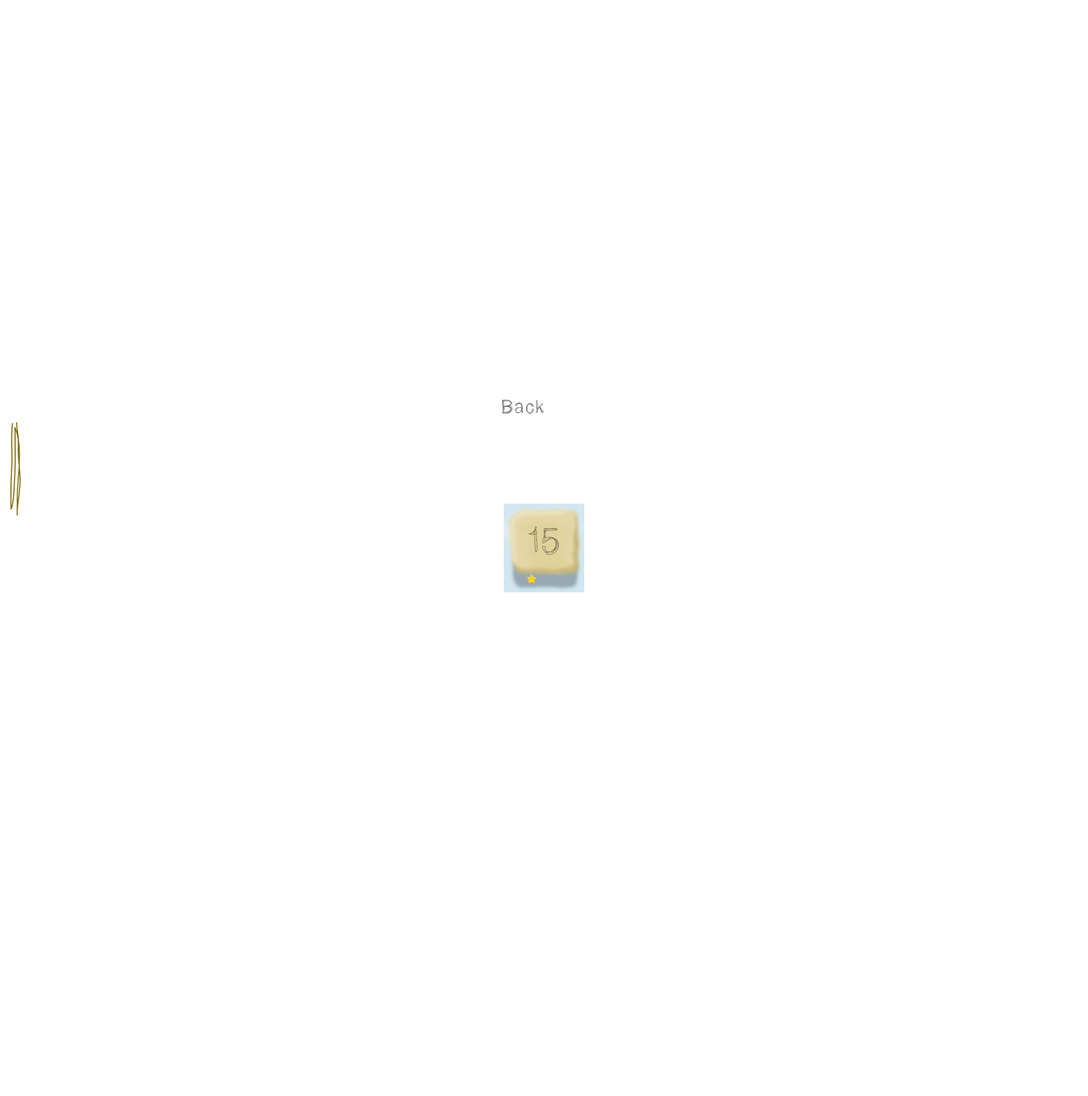
<style>
.page{position:relative;width:1088px;height:1096px;background:#ffffff}
.page>*{position:absolute;margin:0}
.t1{font:18.7px "LightScribe";color:#606060}
.t2{font:37px "LightScribe";color:#6c654e}
</style>
<div class="page">
<p class="t1" style="left:502px;top:399px;width:42px;height:15px">Back</p>
<p class="t2" style="left:528px;top:526px;width:31px;height:29px">15</p>
</div>
